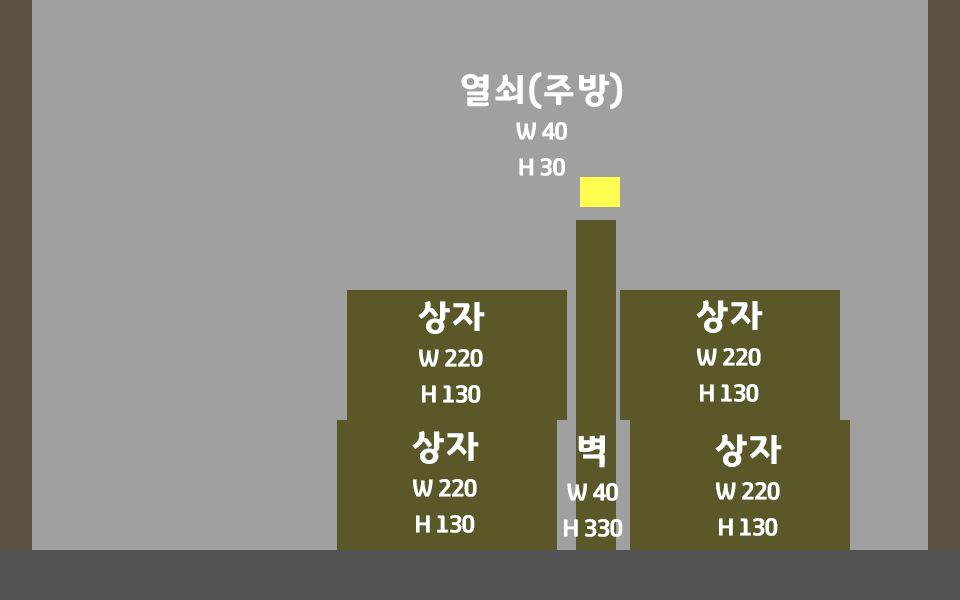
<style>
.page{position:relative;width:960px;height:600px;background:#a0a0a0}
.page>*{position:absolute;margin:0}
.t1{font:24px/36px "GyeonggiTitleV";letter-spacing:-0.05em;color:#ffffff}
.t2{font:36px/12px "GyeonggiTitleV";letter-spacing:-0.05em;color:#ffffff}
</style>
<div class="page">
<p class="t1" style="left:461px;top:72px;width:162px;height:104px;text-align:center"><span class="t2">열쇠(주방)<br><br><br><br></span>W 40<br>H 30</p>
<p class="t1" style="left:418px;top:301px;width:67px;height:102px;text-align:center"><span class="t2">상자<br><br><br><br></span>W 220<br>H 130</p>
<p class="t1" style="left:696px;top:300px;width:67px;height:102px;text-align:center"><span class="t2">상자<br><br><br><br></span>W 220<br>H 130</p>
<p class="t1" style="left:412px;top:431px;width:67px;height:102px;text-align:center"><span class="t2">상자<br><br><br><br></span>W 220<br>H 130</p>
<p class="t1" style="left:564px;top:435px;width:59px;height:102px;text-align:center"><span class="t2">벽<br><br><br><br></span>W 40<br>H 330</p>
<p class="t1" style="left:715px;top:434px;width:67px;height:102px;text-align:center"><span class="t2">상자<br><br><br><br></span>W 220<br>H 130</p>
</div>
